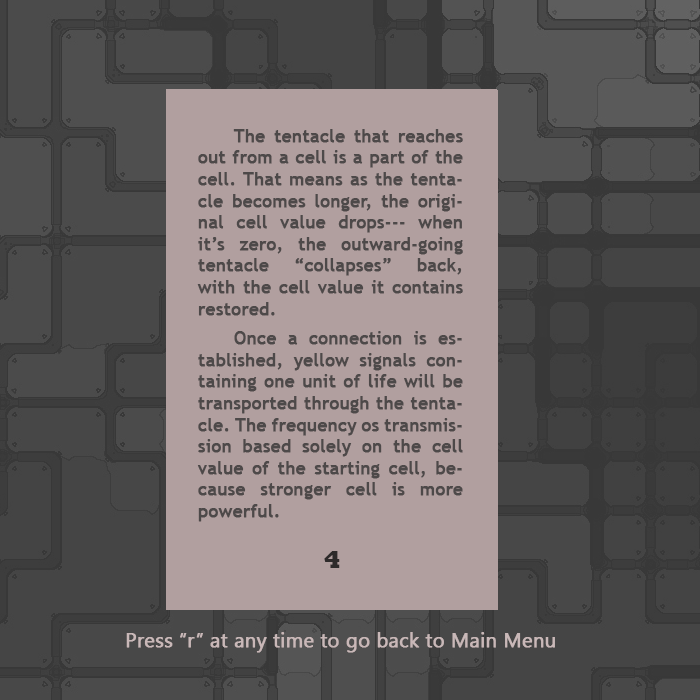
<style>
.page{position:relative;width:700px;height:700px;background:#b19f9f}
.page>*{position:absolute;margin:0}
.t1{font:18px "TrebuchetMS";color:#4d4949;font-weight:bold}
.t2{font:35px "TrajanPro-Regular";color:#4d4949;font-weight:bold;font-style:italic}
.t3{font:25px "Rockwell-ExtraBold";color:#2e2b2b}
.t4{font:20px "SegoeUISymbol";color:#c9b8b8;font-weight:bold}
</style>
<div class="page">
<p class="t1" style="left:197px;top:129px;width:266px;height:393px;text-align:justify"><span class="t2"> </span>The tentacle that reaches out from a cell is a part of the cell. That means as the tentacle becomes longer, the original cell value drops--- when it’s zero, the outward-going tentacle “collapses” back, with the cell value it contains restored.<br> Once a connection is established, yellow signals containing one unit of life will be transported through the tentacle. The frequency os transmission based solely on the cell value of the starting cell, because stronger cell is more powerful.</p>
<p class="t3" style="left:324px;top:551px;width:16px;height:17px">4</p>
<p class="t4" style="left:126px;top:632px;width:429px;height:21px">Press “r” at any time to go back to Main Menu</p>
</div>
